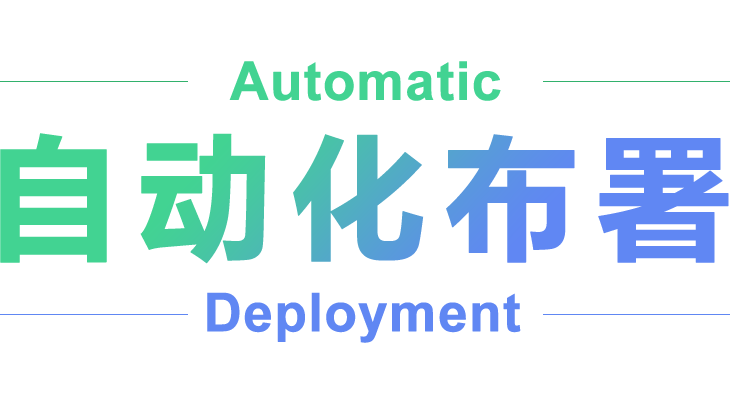
<style>
.page{position:relative;width:730px;height:400px;background:#ffffff}
.page>*{position:absolute;margin:0}
.t1{font:53.2px "Arial-BoldMT";color:#42d392;font-weight:bold}
.t2{font:133px "MicrosoftYaHei-Bold";letter-spacing:0.12em;font-weight:bold}
.t3{font:53.2px "Arial-BoldMT";color:#6087f3;font-weight:bold}
</style>
<div class="page">
<p class="t1" style="left:229px;top:61px;width:272px;height:40px">Automatic</p>
<p class="t2" style="left:0px;top:133px;width:729px;height:131px">自动化布署</p>
<p class="t3" style="left:207px;top:292px;width:314px;height:51px">Deployment</p>
</div>
